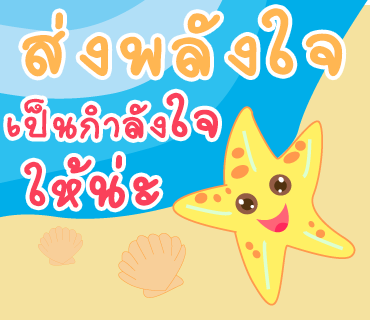
<style>
.page{position:relative;width:370px;height:320px;background:#f5e29f}
.page>*{position:absolute;margin:0}
.t1{font:110px "2005_iannnnnMTV";letter-spacing:0.05em;color:#ffb652;scale:1.06 1}
.t2{font:120px "2005_iannnnnMTV";letter-spacing:0.05em;color:#ffb652;scale:1.06 1}
.t3{font:60px "2005_iannnnnMTV";letter-spacing:0.025em;color:#fa405a;scale:1.06 1}
.t4{font:80px "2005_iannnnnMTV";letter-spacing:0.025em;color:#fa405a;scale:1.06 1}
.t5{font:90px "2005_iannnnnMTV";letter-spacing:0.025em;color:#fa405a;scale:1.06 1}
</style>
<div class="page">
<p class="t1" style="left:22px;top:8px;width:321px;height:70px">ส่งพลัง<span class="t2">ใจ</span></p>
<p class="t3" style="left:7px;top:92px;width:211px;height:47px">เป็นกำลัง<span class="t4">ใจ</span></p>
<p class="t4" style="left:24px;top:155px;width:136px;height:54px">ให้<span class="t5">น่ะ</span></p>
</div>
